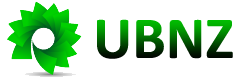
<style>
.page{position:relative;width:250px;height:80px;background:#ffffff}
.page>*{position:absolute;margin:0}
.t1{font:60px "Calibri-Bold"}
</style>
<div class="page">
<p class="t1" style="left:97px;top:19px;width:136px;height:40px">UBNZ</p>
</div>
